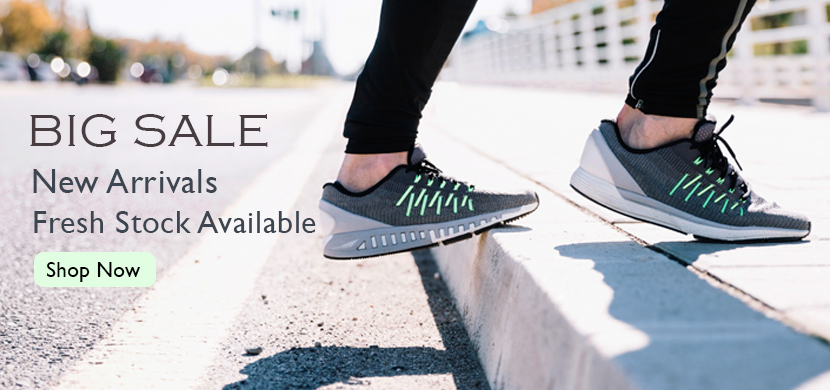
<style>
.page{position:relative;width:830px;height:390px}
.page>*{position:absolute;margin:0}
.t1{font:47px "CopperplateGothic-Light";letter-spacing:0.02em;color:#473d40}
.t2{font:34px "GillSansMT";letter-spacing:0.02em;color:#3d4550}
.t3{font:32px "GillSansMT";letter-spacing:0.02em;color:#3d4550}
.t4{font:21px "GillSansMT";letter-spacing:0.02em;color:#000000}
</style>
<div class="page">
<p class="t1" style="left:30px;top:114px;width:238px;height:33px">BIG SALE</p>
<p class="t2" style="left:33px;top:169px;width:184px;height:24px">New Arrivals</p>
<p class="t3" style="left:34px;top:211px;width:282px;height:22px">Fresh Stock Available</p>
<p class="t4" style="left:47px;top:262px;width:93px;height:20px">Shop Now</p>
</div>
